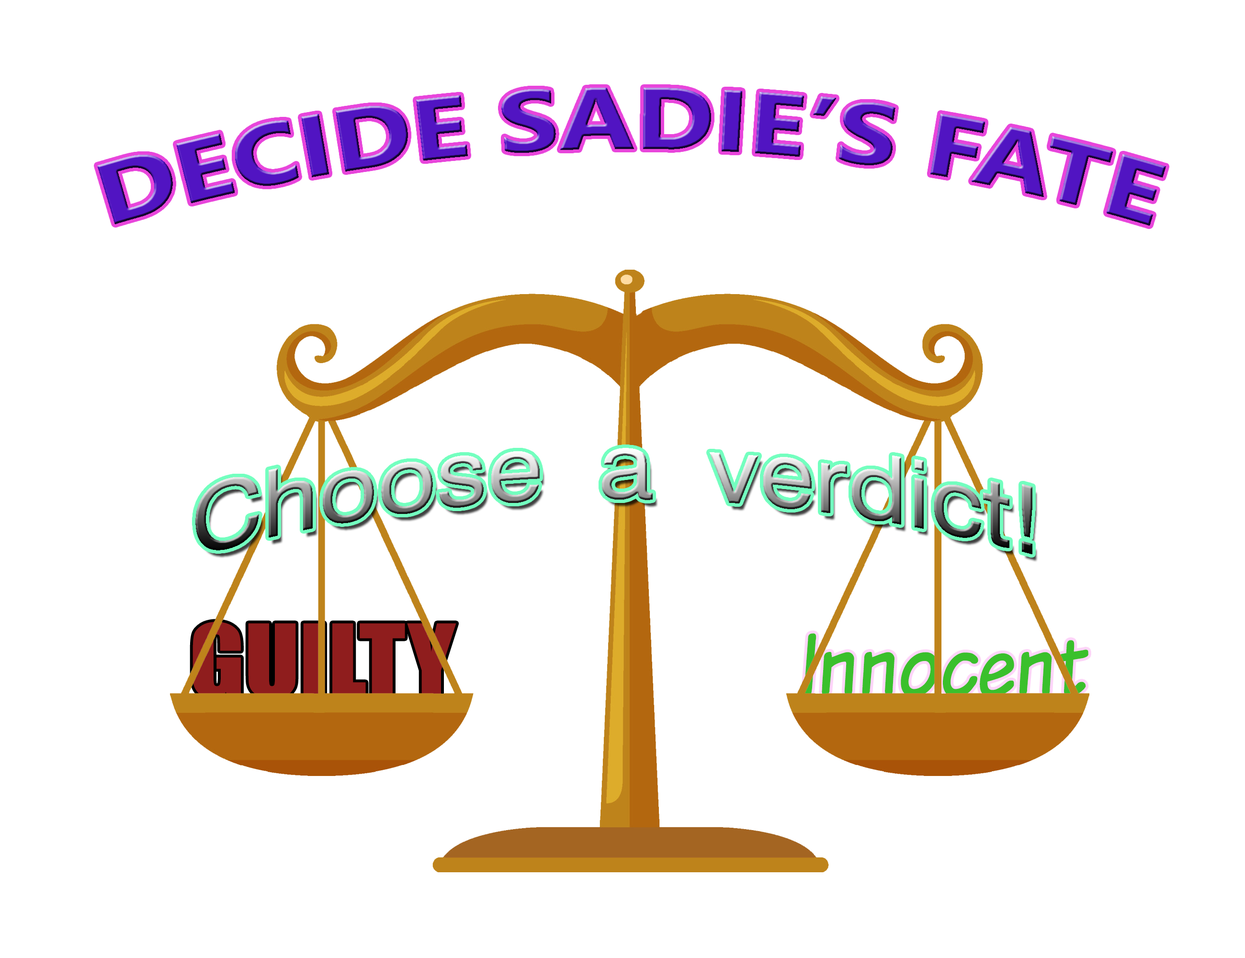
<style>
.page{position:relative;width:1245px;height:958px;background:#ffffff}
.page>*{position:absolute;margin:0}
.t1{font:86.5px "LeelawadeeUI-Bold";color:#5114c2;scale:1.16 1}
.t2{font:93.1px "Swiss721BT-Roman";scale:1.08 1}
.t3{font:93.1px "Impact";color:#8f1d1d;scale:1.08 1}
.t4{font:93.1px "KomikaText";color:#3ac02c;scale:0.86 1}
</style>
<div class="page">
<p class="t1" style="left:97px;top:88px;width:1069px;height:138px">DECIDE SADIE’S FATE</p>
<p class="t2" style="left:195px;top:448px;width:837px;height:106px">Choose  a  verdict!</p>
<p class="t3" style="left:193px;top:622px;width:263px;height:77px">GUILTY</p>
<p class="t4" style="left:804px;top:633px;width:284px;height:65px">Innocent</p>
</div>
